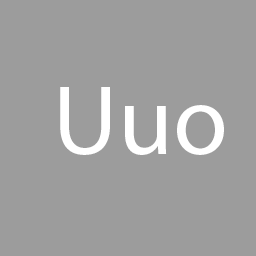
<style>
.page{position:relative;width:256px;height:256px;background:#9c9c9c}
.page>*{position:absolute;margin:0}
.t1{font:100px "MyriadPro-Regular";color:#ffffff}
</style>
<div class="page">
<p class="t1" style="left:60px;top:87px;width:164px;height:68px">Uuo</p>
</div>
